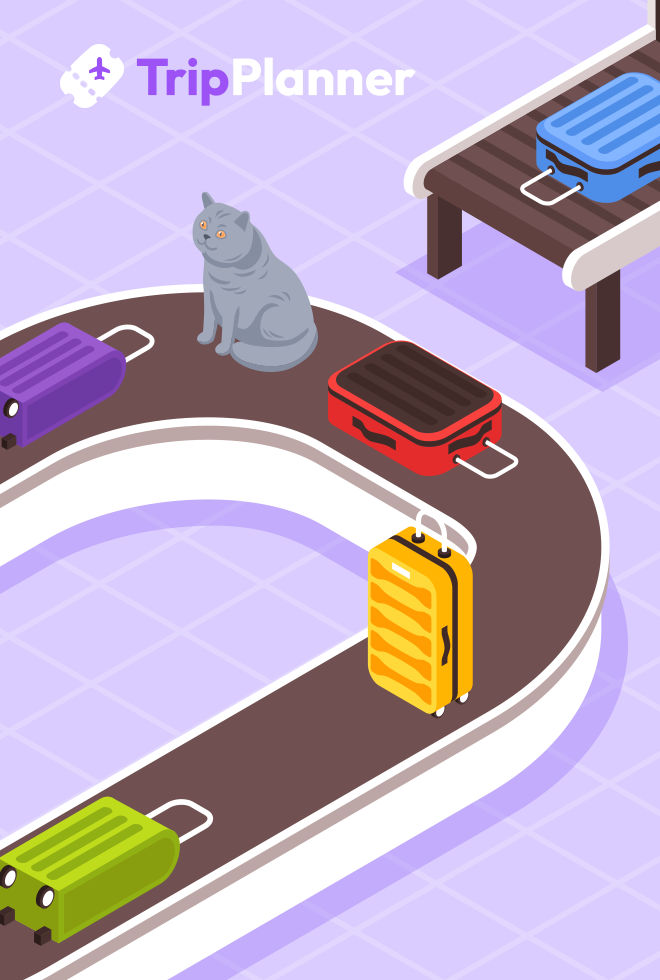
<style>
.page{position:relative;width:660px;height:980px;background:#daccfe}
.page>*{position:absolute;margin:0}
.t1{font:51.2px "Outfit-Bold";color:#ffffff}
.t2{font:51.2px "Outfit-Bold";color:#9c52f4}
</style>
<div class="page">
<p class="t1" style="left:136px;top:57px;width:280px;height:49px"><span class="t2">Trip</span>Planner</p>
</div>
